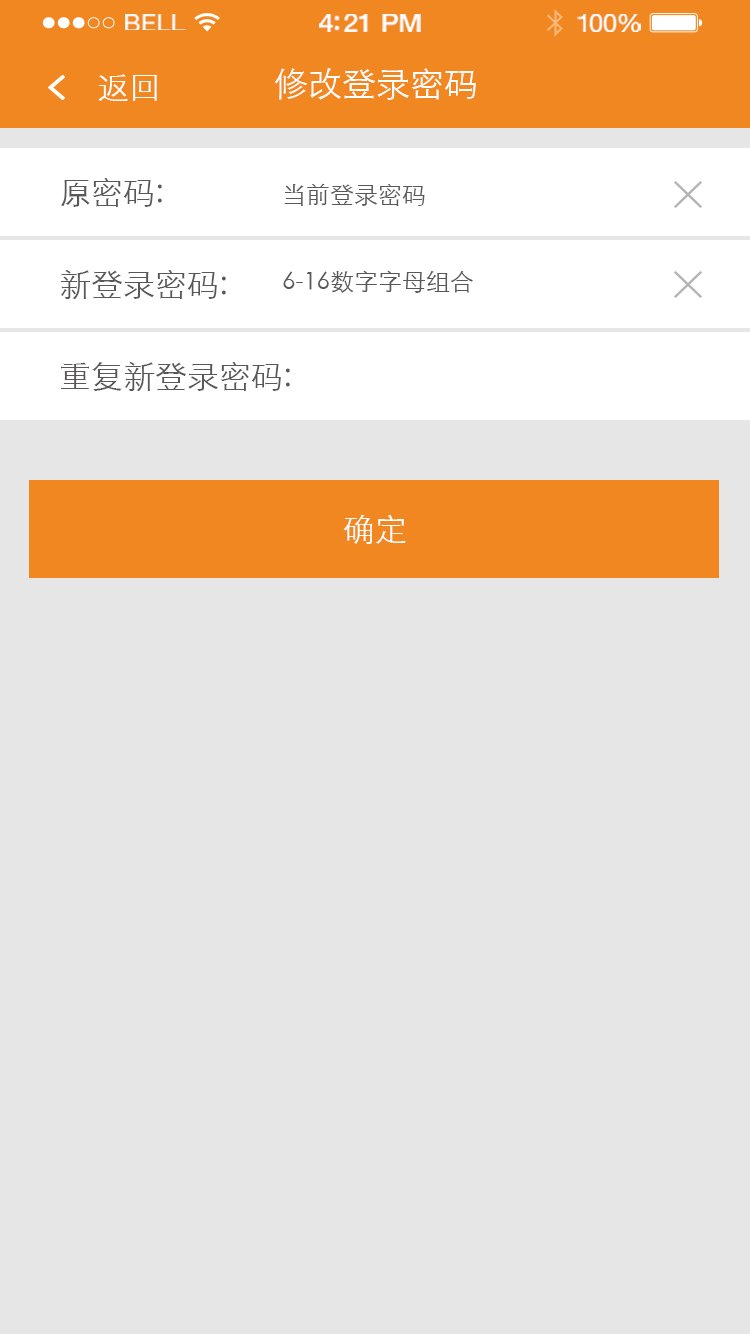
<style>
.page{position:relative;width:750px;height:1334px;background:#e6e6e6}
.page>*{position:absolute;margin:0}
.t1{font:23.3px "HelveticaNeue";letter-spacing:0.02em;color:#ffffff;scale:1.06 1}
.t2{font:25.3px "HelveticaNeue-Medium";letter-spacing:-0.02em;color:#ffffff;scale:1.06 1}
.t3{font:24.3px "HelveticaNeue";letter-spacing:-0.02em;color:#ffffff;scale:1.06 1}
.t4{font:32px "STXihei";color:#ffffff}
.t5{font:34px "STXihei";color:#ffffff}
.t6{font:32px "STXihei";color:#595757}
.t7{font:24px "STXihei";color:#595757}
</style>
<div class="page">
<p class="t1" style="left:125px;top:14px;width:61px;height:16px">BELL</p>
<p class="t2" style="left:319px;top:14px;width:102px;height:18px">4:21 PM</p>
<p class="t3" style="left:577px;top:14px;width:64px;height:18px">100%</p>
<p class="t4" style="left:98px;top:74px;width:59px;height:27px">返回</p>
<p class="t5" style="left:274px;top:68px;width:202px;height:32px">修改登录密码</p>
<p class="t6" style="left:61px;top:178px;width:101px;height:29px">原密码:</p>
<p class="t7" style="left:284px;top:183px;width:141px;height:23px">当前登录密码</p>
<p class="t6" style="left:61px;top:270px;width:165px;height:29px">新登录密码:</p>
<p class="t7" style="left:283px;top:270px;width:190px;height:23px">6-16数字字母组合</p>
<p class="t6" style="left:61px;top:362px;width:229px;height:29px">重复新登录密码:</p>
<p class="t4" style="left:343px;top:514px;width:63px;height:30px">确定</p>
</div>
